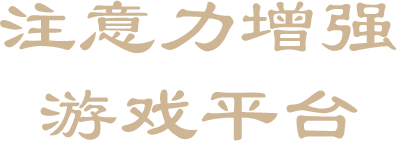
<style>
.page{position:relative;width:396px;height:141px;background:#ffffff}
.page>*{position:absolute;margin:0}
.t1{font:80.6px "LiSu";color:#ceb695}
</style>
<div class="page">
<p class="t1" style="left:0px;top:0px;width:396px;height:53px">注意力增强</p>
<p class="t1" style="left:40px;top:89px;width:318px;height:52px">游戏平台</p>
</div>
